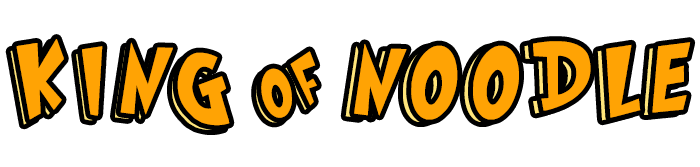
<style>
.page{position:relative;width:700px;height:167px;background:#ffffff}
.page>*{position:absolute;margin:0}
.t1{font:86.2px "Grinched";color:#ffa304}
.t2{font:86.2px "Grinched"}
.t3{font:57px "Grinched";color:#ffa304}
</style>
<div class="page">
<p class="t1" style="left:16px;top:39px;width:214px;height:87px">K I N G</p>
<p class="t1" style="left:354px;top:41px;width:337px;height:79px">N O O D L E</p>
<p class="t2" style="left:10px;top:43px;width:214px;height:87px">K I N G</p>
<p class="t3" style="left:261px;top:51px;width:56px;height:67px;rotate:-23deg">O F</p>
</div>
